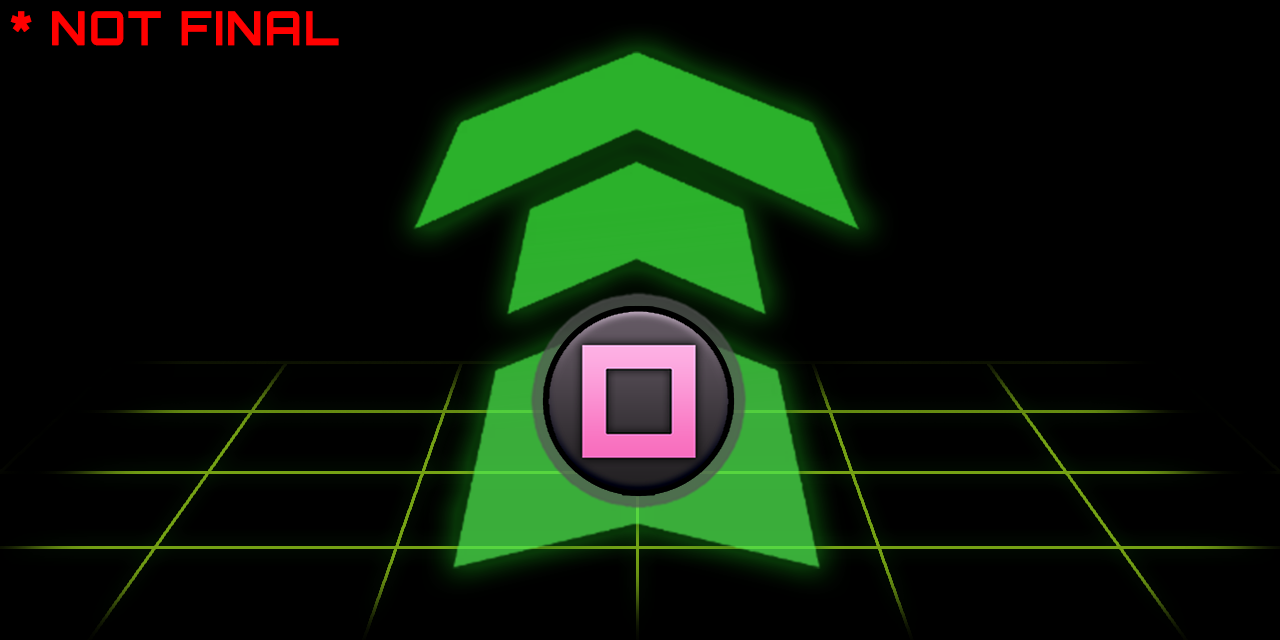
<style>
.page{position:relative;width:1280px;height:640px;background:#000000}
.page>*{position:absolute;margin:0}
.t1{font:46.5px "Orbitron-Bold";letter-spacing:0.025em;color:#ff0000;font-weight:bold;scale:0.95 1}
</style>
<div class="page">
<p class="t1" style="left:10px;top:11px;width:329px;height:35px">* NOT FINAL</p>
</div>
